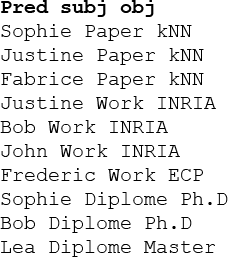
<style>
.page{position:relative;width:228px;height:257px;background:#ffffff}
.page>*{position:absolute;margin:0}
.t1{font:20px "CourierNewPSMT";color:#000000}
.t2{font:20px "CourierNewPS-BoldMT";color:#000000}
</style>
<div class="page">
<p class="t1" style="left:0px;top:0px;width:228px;height:257px"><span class="t2">Pred subj obj<br></span>Sophie Paper kNN<br>Justine Paper kNN<br>Fabrice Paper kNN<br>Justine Work INRIA<br>Bob Work INRIA<br>John Work INRIA<br>Frederic Work ECP<br>Sophie Diplome Ph.D<br>Bob Diplome Ph.D<br>Lea Diplome Master</p>
</div>
